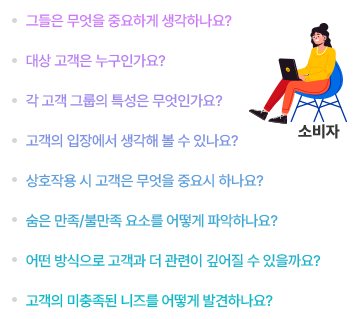
<style>
.page{position:relative;width:360px;height:319px;background:#ffffff}
.page>*{position:absolute;margin:0}
.t1{font:15px/40px "Pretendard-Medium";letter-spacing:-0.025em;text-transform:uppercase}
.t2{font:16px "Pretendard-ExtraBold";color:#373737;text-transform:uppercase}
</style>
<div class="page">
<p class="t1" style="left:26px;top:13px;width:295px;height:295px">그들은 무엇을 중요하게 생각하나요?<br>대상 고객은 누구인가요?<br>각 고객 그룹의 특성은 무엇인가요?<br>고객의 입장에서 생각해 볼 수 있나요?<br>상호작용 시 고객은 무엇을 중요시 하나요?<br>숨은 만족/불만족 요소를 어떻게 파악하나요?<br>어떤 방식으로 고객과 더 관련이 깊어질 수 있을까요?<br>고객의 미충족된 니즈를 어떻게 발견하나요?</p>
<p class="t2" style="left:298px;top:124px;width:42px;height:15px">소비자</p>
</div>
